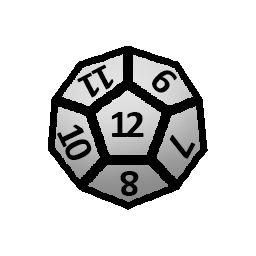
<style>
.page{position:relative;width:256px;height:256px;background:#ffffff}
.page>*{position:absolute;margin:0}
.t1{font:36.4px "Calibri-Bold";letter-spacing:-0.1em;color:#000000;scale:1.1 1}
.t2{font:38.4px "Calibri-Bold";letter-spacing:-0.1em;color:#000000;scale:1.04 1}
.t3{font:40px "Calibri-Bold";letter-spacing:-0.1em;color:#000000}
</style>
<div class="page">
<p class="t1" style="left:77px;top:64px;width:37px;height:34px;rotate:153deg">11</p>
<p class="t2" style="left:152px;top:70px;width:25px;height:23px;rotate:46deg">6</p>
<p class="t3" style="left:111px;top:112px;width:33px;height:25px">12</p>
<p class="t3" style="left:57px;top:124px;width:35px;height:36px;rotate:64deg">10</p>
<p class="t3" style="left:169px;top:134px;width:27px;height:25px;rotate:118deg">7</p>
<p class="t3" style="left:120px;top:171px;width:19px;height:25px;rotate:180deg">8</p>
</div>
